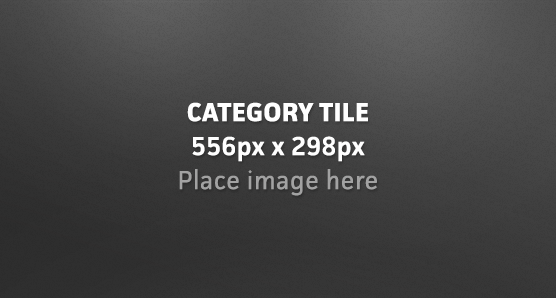
<style>
.page{position:relative;width:556px;height:298px}
.page>*{position:absolute;margin:0}
.t1{font:26px/34px "Facit-Regular";letter-spacing:0.02em;color:#a2a2a2}
.t2{font:26px/34px "Facit-Bold";letter-spacing:0.02em;color:#ffffff}
.t3{font:26px/34px "Facit-Semibold";letter-spacing:0.02em;color:#ffffff}
</style>
<div class="page">
<p class="t1" style="left:179px;top:102px;width:198px;height:94px;text-align:center"><span class="t2">CATEGORY TILE<br></span><span class="t3">556px x 298px<br></span>Place image here</p>
</div>
